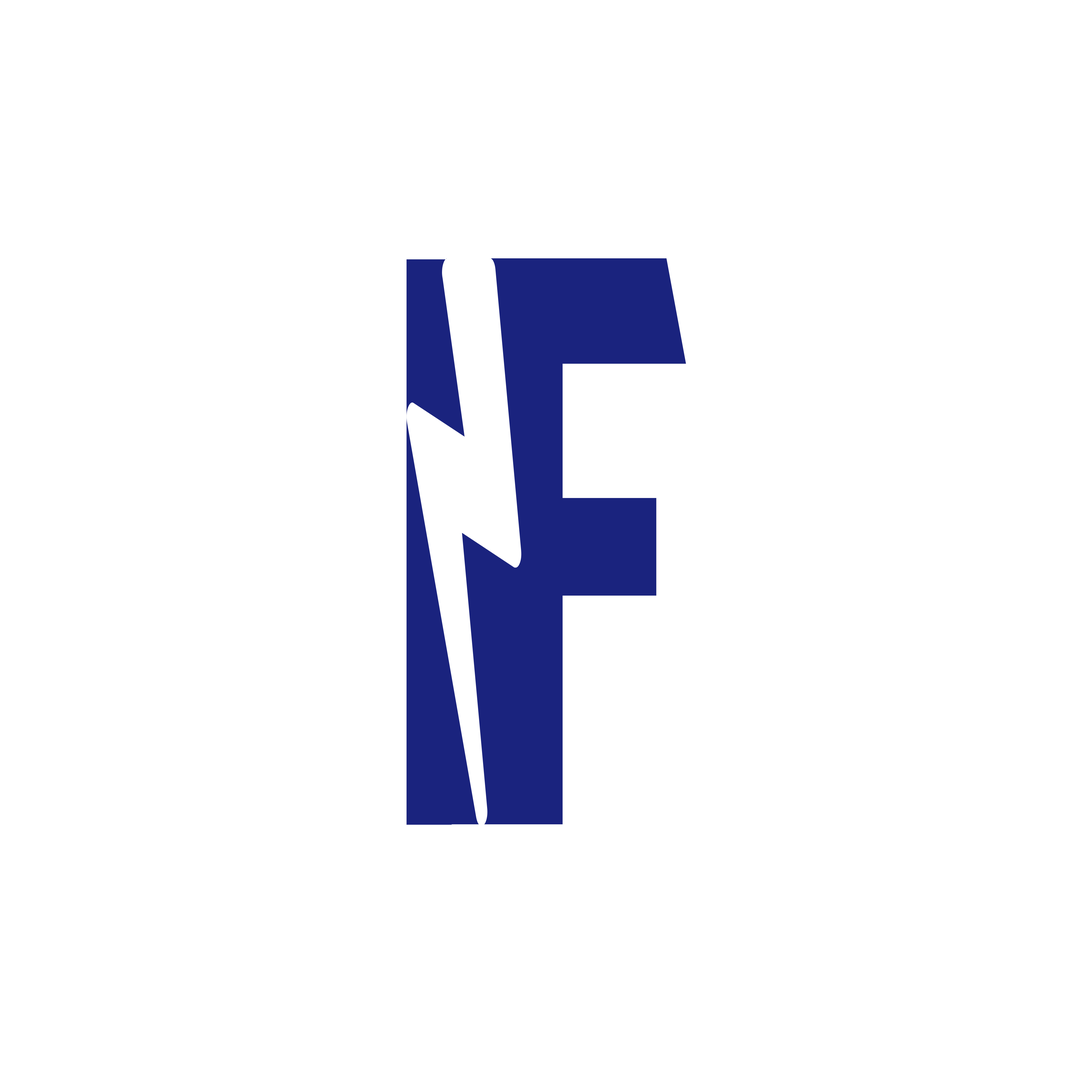
<style>
.page{position:relative;width:1092px;height:1092px;background:#ffffff}
.page>*{position:absolute;margin:0}
.t1{font:780.6px "AmericanCaptain";color:#1a237e}
</style>
<div class="page">
<p class="t1" style="left:446px;top:258px;width:240px;height:566px">F</p>
</div>
